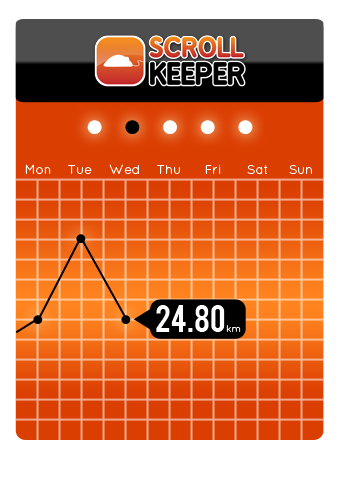
<style>
.page{position:relative;width:340px;height:482px;background:#ffffff}
.page>*{position:absolute;margin:0}
.t1{font:13px "QuicksandBook-Regular";color:#ffffff}
.t2{font:30px "Bebas";color:#ffffff}
.t3{font:10px "QuicksandBook-Regular";color:#fffefd}
</style>
<div class="page">
<p class="t1" style="left:25px;top:164px;width:26px;height:10px">Mon</p>
<p class="t1" style="left:68px;top:165px;width:24px;height:9px">Tue</p>
<p class="t1" style="left:109px;top:164px;width:30px;height:10px">Wed</p>
<p class="t1" style="left:157px;top:165px;width:23px;height:9px">Thu</p>
<p class="t1" style="left:205px;top:165px;width:16px;height:9px">Fri</p>
<p class="t1" style="left:247px;top:165px;width:21px;height:9px">Sat</p>
<p class="t1" style="left:289px;top:165px;width:23px;height:9px">Sun</p>
<p class="t2" style="left:156px;top:305px;width:69px;height:27px">24.80</p>
<p class="t3" style="left:226px;top:325px;width:15px;height:7px">km</p>
</div>
